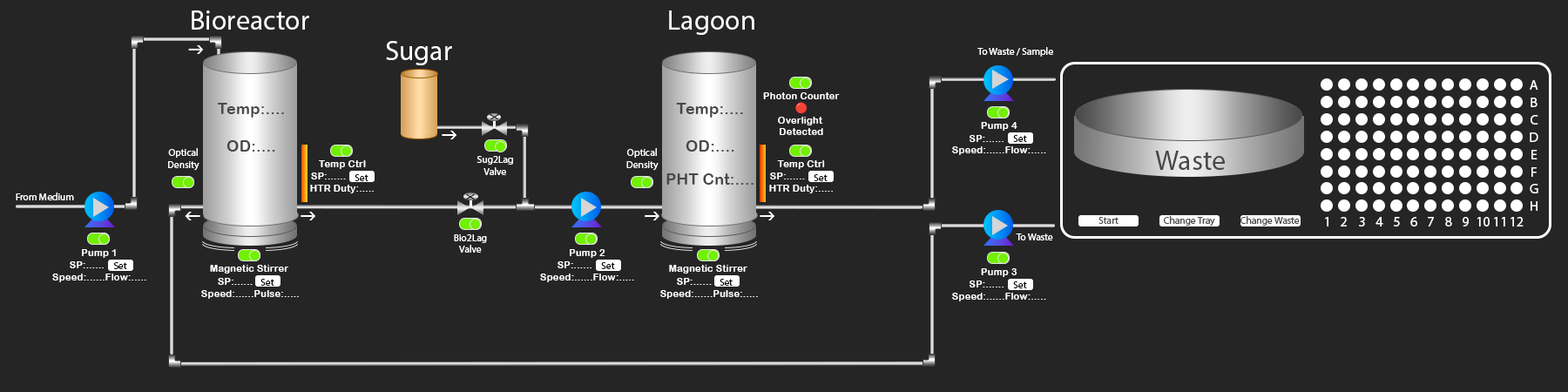
<style>
.page{position:relative;width:1568px;height:392px;background:#252525}
.page>*{position:absolute;margin:0}
.t1{font:28px "MyriadPro-Regular";color:#ffffff}
.t2{font:10px "MyriadPro-Regular";color:#ffffff}
.t3{font:14px "MyriadPro-Regular";color:#ffffff}
.t4{font:10px "ArialRoundedMTBold";color:#ffffff}
.t5{font:10px "NotoColorEmoji-SVG";color:#ffffff}
.t6{font:16px "ArialRoundedMTBold";color:#484848}
.t7{font:10px "MyriadPro-Regular";color:#000000}
.t8{font:28px "MyriadPro-Regular";color:#484848}
.t9{font:10px "MyriadPro-Regular";color:#484848}
</style>
<div class="page">
<p class="t1" style="left:192px;top:10px;width:117px;height:20px">Bioreactor</p>
<p class="t1" style="left:669px;top:10px;width:85px;height:25px">Lagoon</p>
<p class="t1" style="left:386px;top:41px;width:66px;height:24px">Sugar</p>
<p class="t2" style="left:977px;top:47px;width:76px;height:10px">To Waste / Sample</p>
<p class="t3" style="left:1530px;top:80px;width:8px;height:10px">A</p>
<p class="t4" style="left:763px;top:92px;width:77px;height:43px;text-align:center">Photon Counter<br><span class="t5">🔴</span><br>Overlight <br>Detected</p>
<p class="t3" style="left:1531px;top:98px;width:7px;height:9px">B</p>
<p class="t6" style="left:217px;top:103px;width:67px;height:15px">Temp:....</p>
<p class="t6" style="left:676px;top:103px;width:67px;height:15px">Temp:....</p>
<p class="t4" style="left:981px;top:122px;width:36px;height:9px">Pump 4</p>
<p class="t3" style="left:1531px;top:115px;width:7px;height:10px">C</p>
<p class="t4" style="left:952px;top:135px;width:94px;height:20px;text-align:center">SP:......          <br>Speed:......Flow:.....</p>
<p class="t7" style="left:1013px;top:135px;width:14px;height:7px">Set</p>
<p class="t3" style="left:1530px;top:132px;width:8px;height:10px">D</p>
<p class="t2" style="left:168px;top:148px;width:31px;height:23px;text-align:center">Optical<br>Density</p>
<p class="t6" style="left:226px;top:140px;width:49px;height:12px">OD:....</p>
<p class="t2" style="left:626px;top:148px;width:33px;height:23px;text-align:center">Optical<br>Density</p>
<p class="t6" style="left:686px;top:140px;width:48px;height:12px">OD:....</p>
<p class="t3" style="left:1531px;top:150px;width:7px;height:9px">E</p>
<p class="t4" style="left:310px;top:160px;width:64px;height:33px;text-align:center">Temp Ctrl<br>SP:......           <br>HTR Duty:.....</p>
<p class="t2" style="left:476px;top:156px;width:37px;height:19px;text-align:center">Sug2Lag<br>Valve</p>
<p class="t4" style="left:769px;top:160px;width:64px;height:33px;text-align:center">Temp Ctrl<br>SP:......           <br>HTR Duty:.....</p>
<p class="t8" style="left:1155px;top:151px;width:70px;height:19px">Waste</p>
<p class="t6" style="left:666px;top:173px;width:88px;height:12px">PHT Cnt:....</p>
<p class="t3" style="left:1531px;top:167px;width:6px;height:10px">F</p>
<p class="t7" style="left:355px;top:174px;width:13px;height:7px">Set</p>
<p class="t7" style="left:814px;top:174px;width:14px;height:7px">Set</p>
<p class="t3" style="left:1530px;top:184px;width:8px;height:9px">G</p>
<p class="t2" style="left:16px;top:193px;width:58px;height:7px">From Medium</p>
<p class="t3" style="left:1531px;top:201px;width:7px;height:10px">H</p>
<p class="t9" style="left:1098px;top:217px;width:21px;height:7px">Start</p>
<p class="t9" style="left:1164px;top:216px;width:51px;height:10px">Change Tray</p>
<p class="t9" style="left:1240px;top:216px;width:60px;height:10px">Change Waste</p>
<p class="t3" style="left:1325px;top:217px;width:3px;height:9px">1</p>
<p class="t3" style="left:1341px;top:217px;width:6px;height:9px">2</p>
<p class="t3" style="left:1359px;top:217px;width:6px;height:9px">3</p>
<p class="t3" style="left:1375px;top:217px;width:8px;height:9px">4</p>
<p class="t3" style="left:1394px;top:217px;width:6px;height:9px">5</p>
<p class="t3" style="left:1410px;top:217px;width:7px;height:9px">6</p>
<p class="t3" style="left:1428px;top:217px;width:6px;height:9px">7</p>
<p class="t3" style="left:1445px;top:217px;width:7px;height:9px">8</p>
<p class="t3" style="left:1463px;top:217px;width:6px;height:9px">9</p>
<p class="t3" style="left:1477px;top:217px;width:13px;height:9px">10</p>
<p class="t3" style="left:1494px;top:217px;width:11px;height:9px">11</p>
<p class="t3" style="left:1511px;top:217px;width:13px;height:9px">12</p>
<p class="t2" style="left:1016px;top:233px;width:37px;height:7px">To Waste</p>
<p class="t2" style="left:454px;top:234px;width:33px;height:19px;text-align:center">Bio2Lag<br>Valve</p>
<p class="t4" style="left:82px;top:249px;width:34px;height:9px">Pump 1</p>
<p class="t4" style="left:570px;top:249px;width:35px;height:9px">Pump 2</p>
<p class="t4" style="left:52px;top:261px;width:94px;height:21px;text-align:center">SP:......          <br>Speed:......Flow:.....</p>
<p class="t7" style="left:113px;top:262px;width:14px;height:7px">Set</p>
<p class="t4" style="left:210px;top:265px;width:78px;height:9px">Magnetic Stirrer</p>
<p class="t4" style="left:540px;top:261px;width:94px;height:21px;text-align:center">SP:......          <br>Speed:......Flow:.....</p>
<p class="t7" style="left:601px;top:262px;width:14px;height:7px">Set</p>
<p class="t4" style="left:669px;top:265px;width:78px;height:9px">Magnetic Stirrer</p>
<p class="t4" style="left:981px;top:268px;width:36px;height:9px">Pump 3</p>
<p class="t4" style="left:201px;top:278px;width:98px;height:21px;text-align:center">SP:......            <br>Speed:......Pulse:.....</p>
<p class="t7" style="left:260px;top:279px;width:14px;height:7px">Set</p>
<p class="t4" style="left:660px;top:278px;width:98px;height:21px;text-align:center">SP:......            <br>Speed:......Pulse:.....</p>
<p class="t7" style="left:720px;top:279px;width:13px;height:7px">Set</p>
<p class="t4" style="left:952px;top:280px;width:94px;height:21px;text-align:center">SP:......          <br>Speed:......Flow:.....</p>
<p class="t7" style="left:1013px;top:281px;width:14px;height:7px">Set</p>
</div>
